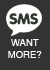
<style>
.page{position:relative;width:50px;height:70px;background:#333333}
.page>*{position:absolute;margin:0}
.t1{font:9.5px "Helvetica";color:#ffffff}
</style>
<div class="page">
<p class="t1" style="left:8px;top:39px;width:34px;height:19px;text-align:center">WANT<br>MORE?</p>
</div>
